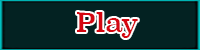
<style>
.page{position:relative;width:200px;height:50px;background:#032222}
.page>*{position:absolute;margin:0}
.t1{font:25.7px "Superclarendon-Regular";color:#d40711}
</style>
<div class="page">
<p class="t1" style="left:77px;top:12px;width:61px;height:26px">Play</p>
</div>
